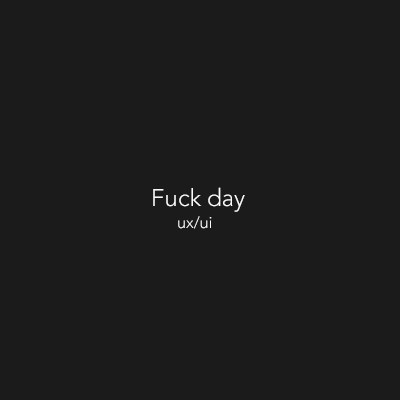
<style>
.page{position:relative;width:400px;height:400px;background:#1b1b1b}
.page>*{position:absolute;margin:0}
.t1{font:24px "Avenir-Light";color:#fbfbfb}
.t2{font:16px "Avenir-Light";color:#fbfbfb}
</style>
<div class="page">
<p class="t1" style="left:153px;top:187px;width:92px;height:25px">Fuck day</p>
<p class="t2" style="left:178px;top:216px;width:34px;height:13px">ux/ui</p>
</div>
